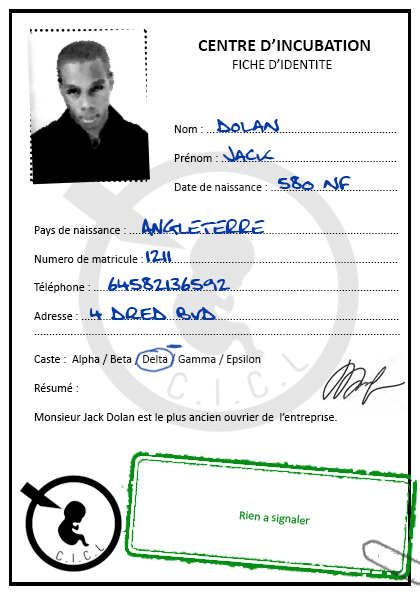
<style>
.page{position:relative;width:420px;height:595px;background:#ffffff}
.page>*{position:absolute;margin:0}
.t1{font:18px "Calibri-Bold";color:#000000}
.t2{font:14px "Calibri";color:#000000}
.t3{font:12px "Calibri"}
.t4{font:19px "FatboySlimBLTC(BRK)";color:#003aa4}
.t5{font:12px "Calibri";color:#000000}
.t6{font:12px "Calibri";color:#058c15}
</style>
<div class="page">
<p class="t1" style="left:198px;top:39px;width:172px;height:12px">CENTRE D’INCUBATION</p>
<p class="t2" style="left:233px;top:59px;width:99px;height:10px">FICHE D’IDENTITE</p>
<p class="t3" style="left:174px;top:125px;width:223px;height:66px">Nom : ...............................................................<br><br>Prénom : ..........................................................<br><br>Date de naissance : ..........................................</p>
<p class="t4" style="left:216px;top:119px;width:64px;height:13px">dolan</p>
<p class="t4" style="left:222px;top:146px;width:53px;height:16px">Jack</p>
<p class="t4" style="left:277px;top:176px;width:74px;height:14px">580 nf</p>
<p class="t4" style="left:141px;top:218px;width:124px;height:18px">ANGLETERRE</p>
<p class="t5" style="left:34px;top:226px;width:366px;height:197px">Pays de naissance : .........................................................................................<br><br>Numero de matricule : ...................................................................................<br><br>Téléphone : .....................................................................................................<br><br>Adresse : .........................................................................................................<br>.........................................................................................................................<br><br>Caste :  Alpha / Beta / Delta / Gamma / Epsilon <br><br>Résumé :<br><br>Monsieur Jack Dolan est le plus ancien ouvrier de  l’entreprise.</p>
<p class="t4" style="left:145px;top:250px;width:27px;height:12px">1211</p>
<p class="t4" style="left:107px;top:277px;width:124px;height:14px">64582136592</p>
<p class="t4" style="left:89px;top:307px;width:127px;height:13px">4 dred bvd</p>
<p class="t6" style="left:239px;top:511px;width:71px;height:14px;rotate:5deg">Rien a signaler</p>
</div>
